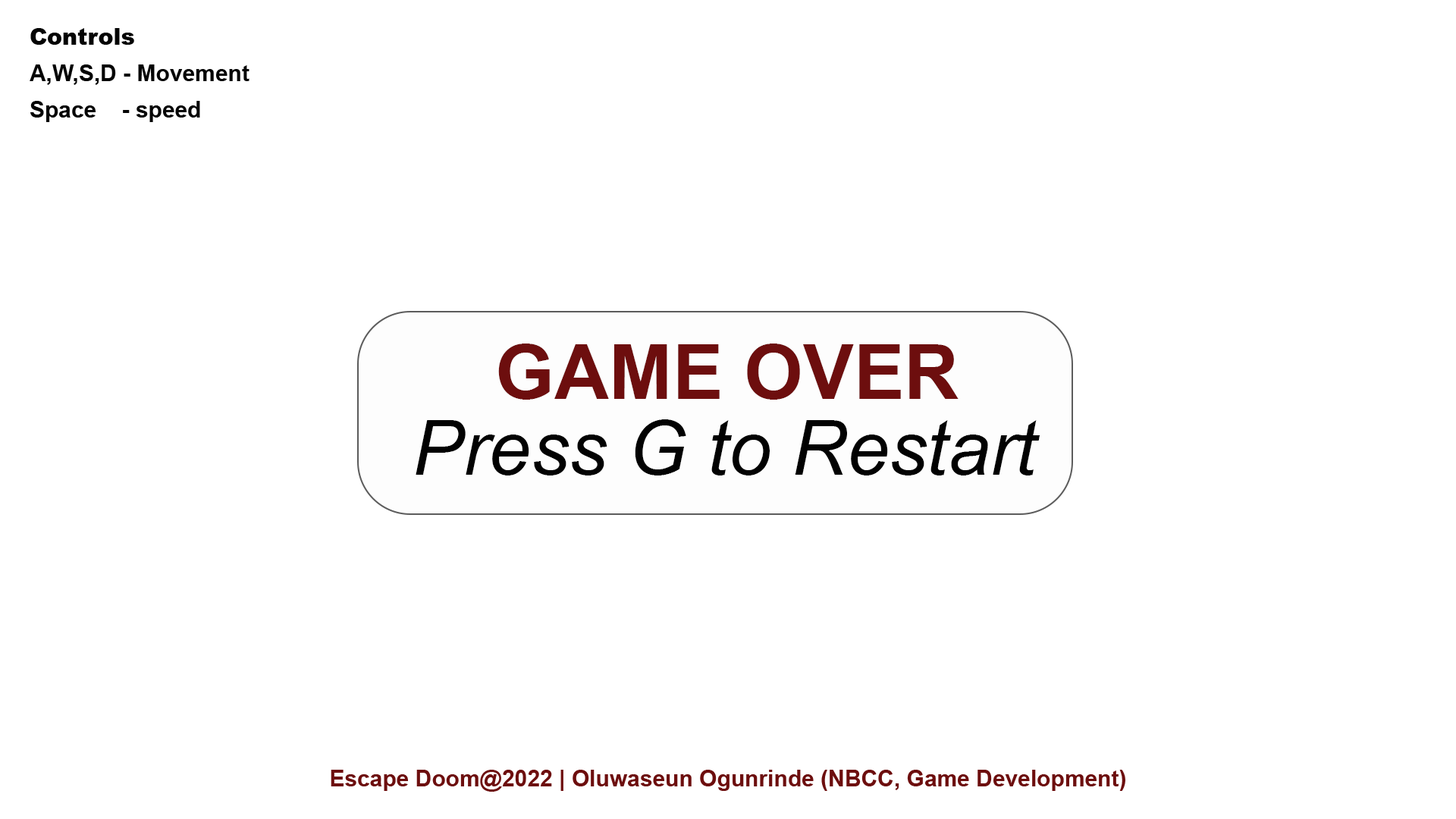
<style>
.page{position:relative;width:1456px;height:819px;background:#ffffff}
.page>*{position:absolute;margin:0}
.t1{font:22.7px/36.4px "Arial-BoldMT";color:#040404}
.t2{font:22.7px/118.3px "Arial-Black";color:#040404}
.t3{font:75.8px "Arial-BoldMT";color:#6d0e0e;text-transform:uppercase}
.t4{font:75.8px "Arial-ItalicMT";color:#020202}
.t5{font:22.7px "Arial-BoldMT";color:#6d0e0e}
</style>
<div class="page">
<p class="t1" style="left:30px;top:28px;width:219px;height:94px"><span class="t2">Controls<br></span>A,W,S,D - Movement<br>Space    - speed</p>
<p class="t3" style="left:498px;top:344px;width:461px;height:56px">Game Over</p>
<p class="t4" style="left:416px;top:419px;width:624px;height:56px">Press G to Restart</p>
<p class="t5" style="left:331px;top:770px;width:794px;height:22px">Escape Doom@2022 | Oluwaseun Ogunrinde (NBCC, Game Development)</p>
</div>
